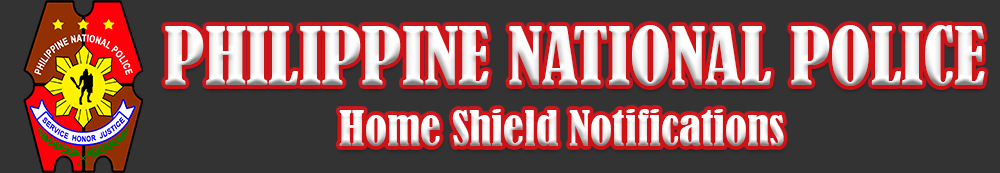
<style>
.page{position:relative;width:1000px;height:173px;background:#333333}
.page>*{position:absolute;margin:0}
.t1{font:75px "BernardMT-Condensed";color:#fefefe}
.t2{font:45.8px "BernardMT-Condensed";color:#fefefe}
</style>
<div class="page">
<p class="t1" style="left:165px;top:25px;width:820px;height:61px">PHILIPPINE NATIONAL POLICE</p>
<p class="t2" style="left:339px;top:109px;width:445px;height:37px">Home Shield Notifications</p>
</div>
